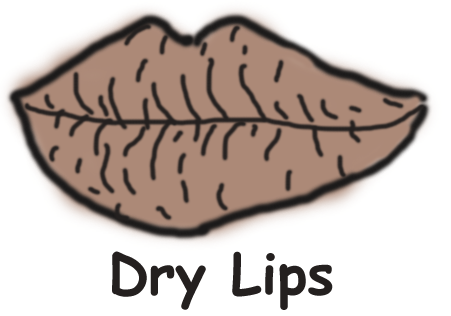
<style>
.page{position:relative;width:451px;height:316px;background:#ffffff}
.page>*{position:absolute;margin:0}
.t1{font:56px "ComicSansMS-Bold";color:#24201f}
</style>
<div class="page">
<p class="t1" style="left:112px;top:251px;width:221px;height:59px">Dry Lips</p>
</div>
